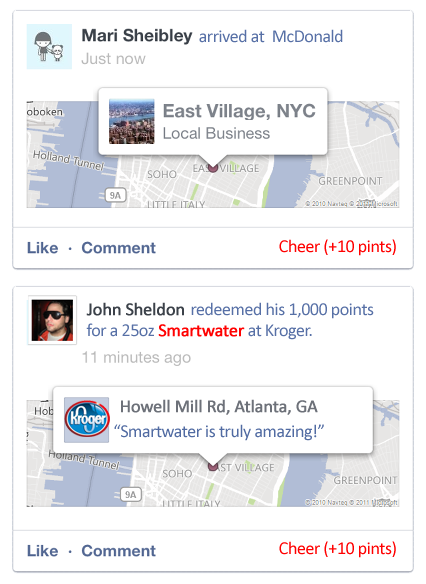
<style>
.page{position:relative;width:426px;height:584px;background:#ffffff}
.page>*{position:absolute;margin:0}
.t1{font:18px "Calibri";letter-spacing:-0.025em;color:#5770a6}
.t2{font:18px "Calibri";letter-spacing:-0.025em;color:#ff0000}
.t3{font:18px "Calibri";letter-spacing:-0.025em;color:#3b4149;font-weight:bold}
.t4{font:18px "Calibri";letter-spacing:-0.025em;color:#ff0101;font-weight:bold}
.t5{font:18px "Calibri";letter-spacing:-0.025em;color:#6d7179;font-weight:bold}
.t6{font:18px "Calibri";letter-spacing:-0.025em;color:#516ba2}
</style>
<div class="page">
<p class="t1" style="left:199px;top:29px;width:144px;height:14px">arrived at  McDonald</p>
<p class="t2" style="left:279px;top:239px;width:117px;height:17px">Cheer (+10 pints)</p>
<p class="t3" style="left:86px;top:302px;width:98px;height:14px">John Sheldon</p>
<p class="t1" style="left:191px;top:302px;width:183px;height:17px">redeemed his 1,000 points</p>
<p class="t1" style="left:86px;top:323px;width:226px;height:17px">for a 25oz <span class="t4">Smartwater </span>at Kroger.</p>
<p class="t5" style="left:121px;top:399px;width:197px;height:16px">Howell Mill Rd, Atlanta, GA</p>
<p class="t6" style="left:114px;top:424px;width:210px;height:17px">“Smartwater is truly amazing!”</p>
<p class="t2" style="left:279px;top:541px;width:117px;height:17px">Cheer (+10 pints)</p>
</div>
